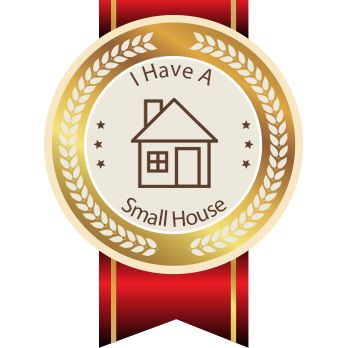
<style>
.page{position:relative;width:348px;height:348px;background:#ffffff}
.page>*{position:absolute;margin:0}
.t1{font:22.8px "MyriadPro-Regular";color:#5c3f2d}
</style>
<div class="page">
<p class="t1" style="left:129px;top:63px;width:83px;height:23px">I Have A</p>
<p class="t1" style="left:121px;top:197px;width:106px;height:30px">Small House</p>
</div>
